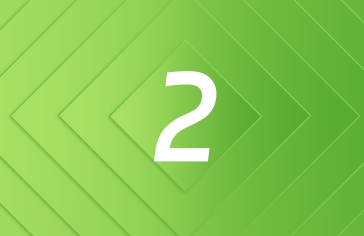
<style>
.page{position:relative;width:364px;height:236px}
.page>*{position:absolute;margin:0}
.t1{font:120px "DingTalk-JinBuTi";letter-spacing:0.1em;color:#ffffff}
</style>
<div class="page">
<p class="t1" style="left:154px;top:71px;width:63px;height:91px">2</p>
</div>
